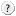
<style>
.page{position:relative;width:16px;height:16px;background:#ffffff}
.page>*{position:absolute;margin:0}
.t1{font:11.1px "MyriadPro-Regular";color:#000000}
</style>
<div class="page">
<p class="t1" style="left:6px;top:4px;width:4px;height:8px">?</p>
</div>
